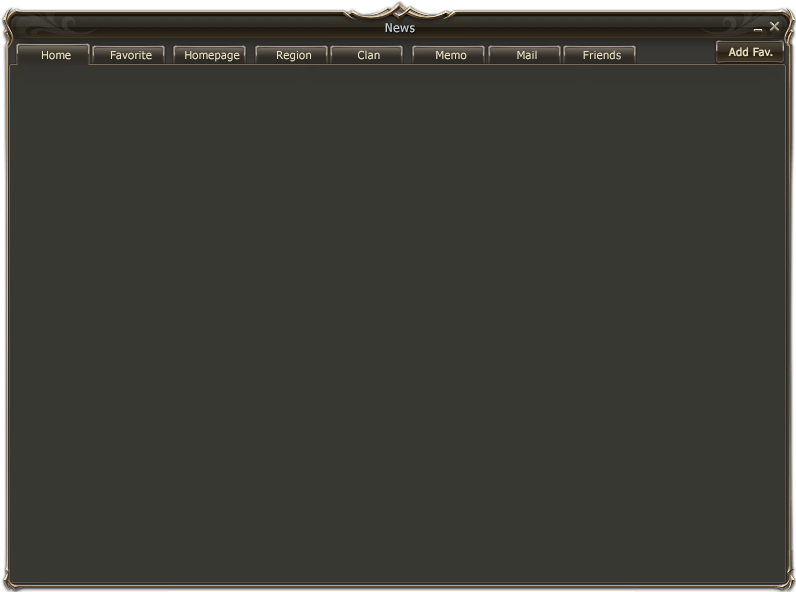
<style>
.page{position:relative;width:796px;height:592px;background:#383833}
.page>*{position:absolute;margin:0}
.t1{font:12px "Tahoma";letter-spacing:0.04em;color:#c6d3db}
.t2{font:11px "Tahoma";letter-spacing:0.04em;color:#eae0c2}
</style>
<div class="page">
<p class="t1" style="left:385px;top:23px;width:30px;height:10px">News</p>
<p class="t2" style="left:42px;top:51px;width:29px;height:9px">Home</p>
<p class="t2" style="left:111px;top:51px;width:41px;height:9px">Favorite</p>
<p class="t2" style="left:185px;top:51px;width:55px;height:11px">Homepage</p>
<p class="t2" style="left:277px;top:51px;width:34px;height:11px">Region</p>
<p class="t2" style="left:358px;top:50px;width:22px;height:10px">Clan</p>
<p class="t2" style="left:436px;top:51px;width:31px;height:9px">Memo</p>
<p class="t2" style="left:517px;top:50px;width:20px;height:10px">Mail</p>
<p class="t2" style="left:583px;top:50px;width:38px;height:10px">Friends</p>
<p class="t2" style="left:728px;top:47px;width:45px;height:10px">Add Fav.</p>
</div>
